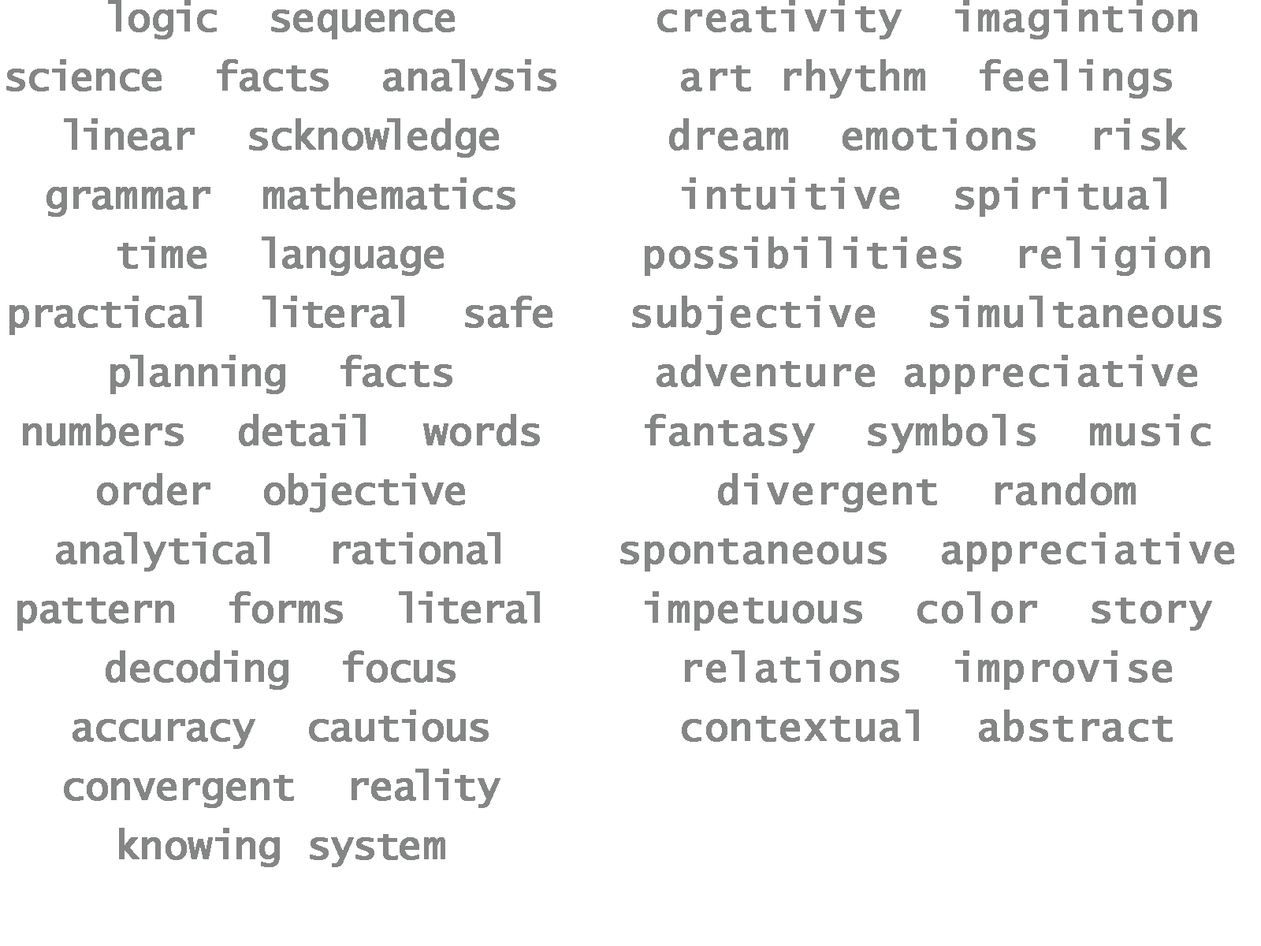
<style>
.page{position:relative;width:1261px;height:946px;background:#ffffff}
.page>*{position:absolute;margin:0}
.t1{font:39.4px/59.1px "LucidaConsole";color:#848585;font-weight:bold}
.t2{font:9.5px/59.1px "LucidaConsole";color:#848585;font-weight:bold}
</style>
<div class="page">
<p class="t1" style="left:6px;top:0px;width:550px;height:867px;text-align:center">logic  sequence  science  facts  analysis  linear  scknowledge  grammar  mathematics  time  language  practical  literal  safe  planning  facts  numbers  detail  words  order  objective  analytical  rational  pattern  forms  literal  decoding  focus  accuracy  cautious convergent  reality  knowing system</p>
<p class="t2" style="left:620px;top:0px;width:614px;height:742px;text-align:center">creativity  imagintion  art rhythm  feelings  dream  emotions  risk  intuitive  spiritual  possibilities  religion  subjective  simultaneous  adventure appreciative  fantasy  symbols  music  divergent  random  spontaneous  appreciative  impetuous  color  story  relations  improvise  contextual  abstract</p>
</div>
